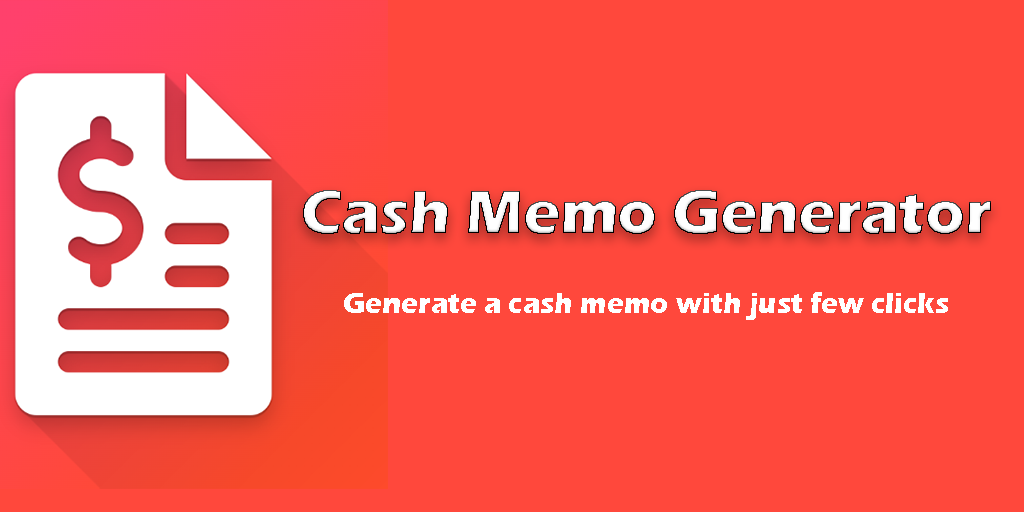
<style>
.page{position:relative;width:1024px;height:512px;background:#ff483c}
.page>*{position:absolute;margin:0}
.t1{font:62.8px "ErasITC-Bold";color:#ffffff}
.t2{font:29.5px "ErasITC-Bold";color:#ffffff;scale:0.96 1}
</style>
<div class="page">
<p class="t1" style="left:303px;top:190px;width:688px;height:44px">Cash Memo Generator</p>
<p class="t2" style="left:344px;top:292px;width:604px;height:28px">Generate a cash memo with just few clicks</p>
</div>
